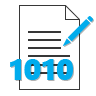
<style>
.page{position:relative;width:96px;height:96px;background:#ffffff}
.page>*{position:absolute;margin:0}
.t1{font:30px "SegoeUIBlack";color:#01aced}
</style>
<div class="page">
<p class="t1" style="left:10px;top:59px;width:63px;height:21px">1010</p>
</div>
